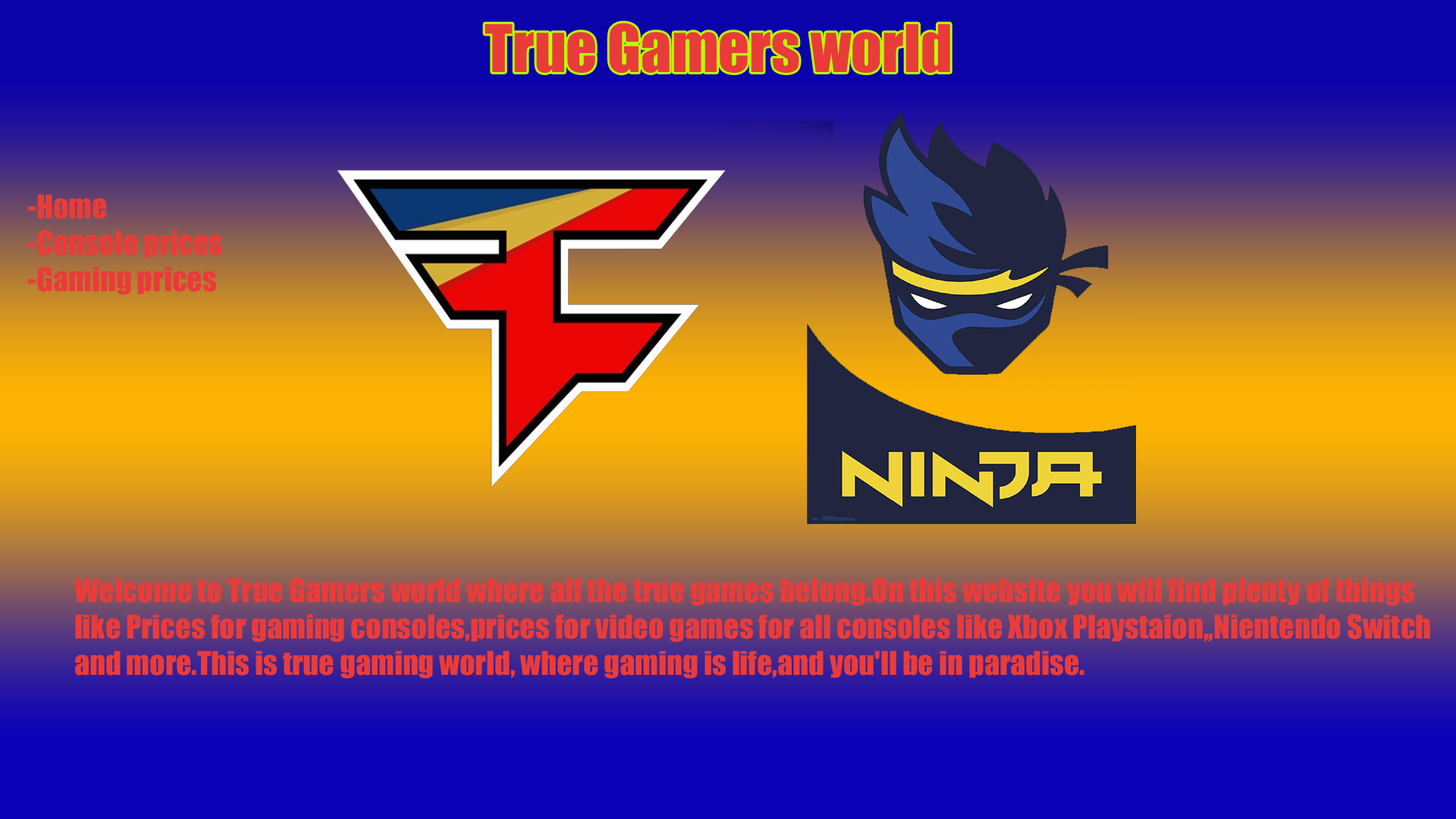
<style>
.page{position:relative;width:1456px;height:819px}
.page>*{position:absolute;margin:0}
.t1{font:60.7px "Impact";color:#e93c3a}
.t2{font:30.3px "Impact";color:#e93c3a}
</style>
<div class="page">
<p class="t1" style="left:485px;top:23px;width:465px;height:51px">True Gamers world</p>
<p class="t2" style="left:27px;top:194px;width:195px;height:101px">-Home<br>-Console prices<br>-Gaming prices</p>
<p class="t2" style="left:74px;top:577px;width:1356px;height:102px">Welcome to True Gamers world where all the true games belong.On this website you will find plenty of things <br>like Prices for gaming consoles,prices for video games for all consoles like Xbox Playstaion,,Nientendo Switch <br>and more.This is true gaming world, where gaming is life,and you'll be in paradise.</p>
</div>
